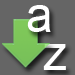
<style>
.page{position:relative;width:75px;height:75px;background:#656565}
.page>*{position:absolute;margin:0}
.t1{font:48px "ArialMT";color:#ffffff}
</style>
<div class="page">
<p class="t1" style="left:27px;top:5px;width:24px;height:27px">a</p>
<p class="t1" style="left:43px;top:44px;width:23px;height:26px">z</p>
</div>
